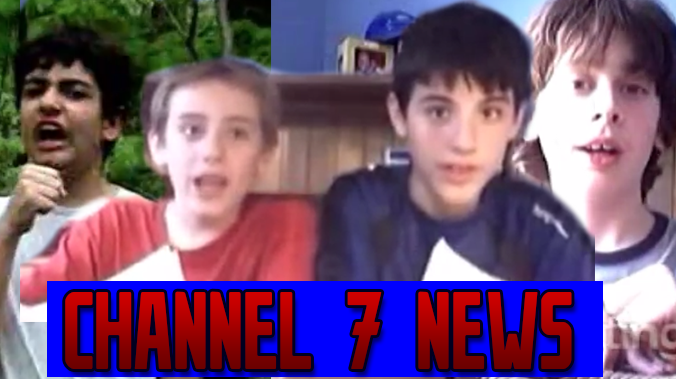
<style>
.page{position:relative;width:676px;height:379px}
.page>*{position:absolute;margin:0}
.t1{font:110px "Stahlbetontrger-Compressed"}
</style>
<div class="page">
<p class="t1" style="left:65px;top:291px;width:507px;height:78px">CHANNEL  7  NEWS</p>
</div>
